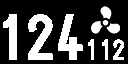
<style>
.page{position:relative;width:128px;height:64px;background:#000000}
.page>*{position:absolute;margin:0}
.t1{font:64px "Logisoso";color:#ffffff;font-weight:bold}
.t2{font:28px "Logisoso";color:#ffffff;font-weight:bold}
</style>
<div class="page">
<p class="t1" style="left:3px;top:14px;width:80px;height:46px">124</p>
<p class="t2" style="left:88px;top:39px;width:36px;height:21px">112</p>
</div>
